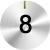
<style>
.page{position:relative;width:50px;height:50px}
.page>*{position:absolute;margin:0}
.t1{font:25px "ArialMT";color:#000000;text-transform:uppercase;font-weight:bold;scale:0.94 1}
</style>
<div class="page">
<p class="t1" style="left:19px;top:14px;width:13px;height:20px">8</p>
</div>
